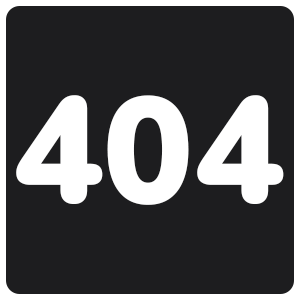
<style>
.page{position:relative;width:300px;height:300px;background:#1d1d1f}
.page>*{position:absolute;margin:0}
.t1{font:150px "Nunito-Black";letter-spacing:0.005em;color:#ffffff}
</style>
<div class="page">
<p class="t1" style="left:16px;top:95px;width:268px;height:110px">404</p>
</div>
